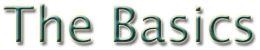
<style>
.page{position:relative;width:260px;height:50px;background:#ffffff}
.page>*{position:absolute;margin:0}
.t1{font:50px "LucidaSans"}
</style>
<div class="page">
<p class="t1" style="left:3px;top:3px;width:250px;height:40px">The Basics</p>
</div>
